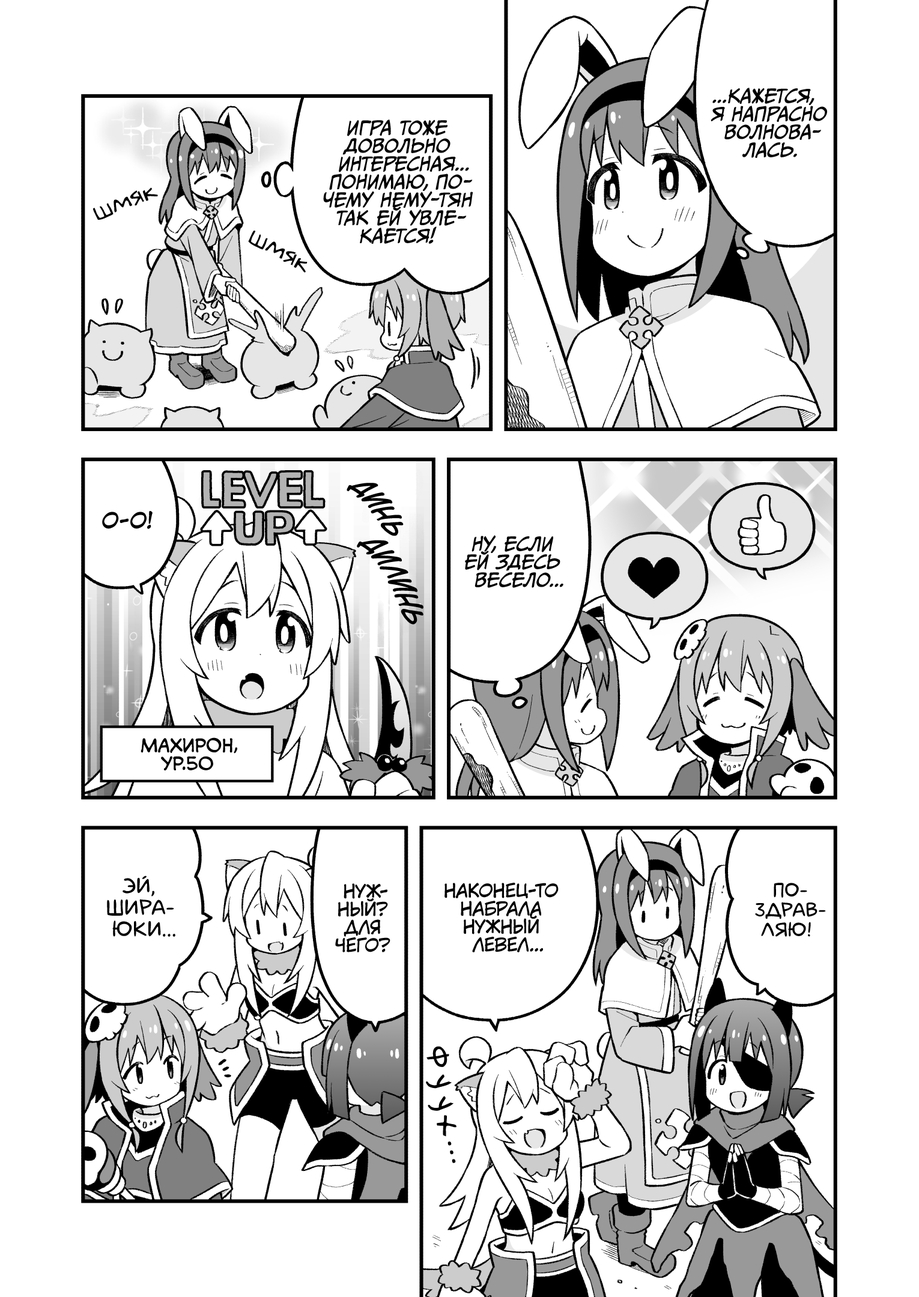
<style>
.page{position:relative;width:919px;height:1297px;background:#ffffff}
.page>*{position:absolute;margin:0}
.t1{font:18px "CCMeanwhile";color:#000000;text-transform:uppercase;font-style:italic}
.t2{font:25.2px "v_Augie";color:#000000}
.t3{font:25.2px "v_CCDearDiary";color:#000000;text-transform:uppercase}
.t4{font:21.6px "KuraiVoice2";color:#000000;text-transform:uppercase}
.t5{font:18px "v_CCMonologous";color:#000000;text-transform:uppercase}
.t6{font:21.6px "laCartoonerie";color:#000000;text-transform:uppercase}
.t7{font:18px "KuraiVoice2";color:#000000;text-transform:uppercase}
.t8{font:19.8px "laCartoonerie";color:#000000;text-transform:uppercase}
.t9{font:32.4px "v_Augie";color:#000000}
.t10{font:32.4px "v_Augie";letter-spacing:0.1em;color:#000000}
</style>
<div class="page">
<p class="t1" style="left:711px;top:88px;width:116px;height:70px;text-align:center">...Кажется,<br>я напрасно<br>волнова-<br>лась.</p>
<p class="t1" style="left:323px;top:120px;width:150px;height:124px;text-align:center">Игра тоже<br>довольно<br>интересная...<br>Понимаю, по-<br>чему Нему-тян<br>так ей увле-<br>кается!</p>
<p class="t2" style="left:93px;top:187px;width:65px;height:33px;rotate:-22deg">шмяк</p>
<p class="t2" style="left:248px;top:231px;width:60px;height:42px;rotate:28deg">шмяк</p>
<p class="t3" style="left:347px;top:483px;width:57px;height:53px;rotate:54deg">динь</p>
<p class="t4" style="left:102px;top:511px;width:51px;height:18px">О-о!</p>
<p class="t3" style="left:357px;top:540px;width:66px;height:85px;rotate:61deg">дилинь</p>
<p class="t1" style="left:465px;top:535px;width:98px;height:53px;text-align:center">Ну, если<br>ей здесь<br>весело...</p>
<p class="t5" style="left:141px;top:738px;width:96px;height:33px;text-align:center">Махирон,<br>ур.50</p>
<p class="t6" style="left:107px;top:876px;width:68px;height:61px;text-align:center">Эй,<br>Шира-<br>юки...</p>
<p class="t7" style="left:335px;top:884px;width:55px;height:69px;text-align:center">Нуж-<br>ный?<br>Для<br>чего?</p>
<p class="t7" style="left:445px;top:883px;width:114px;height:70px;text-align:center">Наконец-то<br>набрала<br>нужный<br>левел...</p>
<p class="t8" style="left:755px;top:883px;width:71px;height:54px;text-align:center">По-<br>здрав-<br>ляю!</p>
<p class="t9" style="left:426px;top:1046px;width:23px;height:21px;rotate:81deg">ф</p>
<p class="t9" style="left:426px;top:1075px;width:26px;height:14px;rotate:70deg">у</p>
<p class="t9" style="left:428px;top:1096px;width:26px;height:15px;rotate:64deg">у</p>
<p class="t9" style="left:437px;top:1115px;width:20px;height:22px;rotate:56deg">х</p>
<p class="t10" style="left:448px;top:1142px;width:8px;height:22px;rotate:77deg">...</p>
</div>
